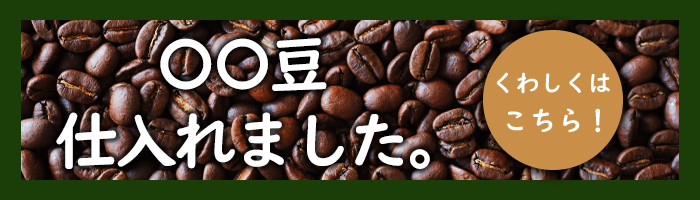
<style>
.page{position:relative;width:700px;height:200px;background:#1b3d08}
.page>*{position:absolute;margin:0}
.t1{font:63px "UDDigiKyokashoN-B";letter-spacing:-0.1em;color:#ffffff}
.t2{font:64.2px "UDDigiKyokashoN-B";letter-spacing:-0.075em;color:#ffffff}
.t3{font:64.2px "UDDigiKyokashoN-B";letter-spacing:-0.1em;color:#ffffff}
</style>
<div class="page">
<p class="t1" style="left:160px;top:38px;width:167px;height:53px">〇〇豆</p>
<p class="t2" style="left:56px;top:112px;width:374px;height:57px">仕入れ<span class="t3">ました</span>。</p>
</div>
